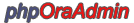
<style>
.page{position:relative;width:134px;height:23px;background:#ffffff}
.page>*{position:absolute;margin:0}
.t1{font:20px "Arial-ItalicMT";color:#ed1414}
.t2{font:20px "Arial-ItalicMT";color:#4b4f7d}
</style>
<div class="page">
<p class="t1" style="left:5px;top:3px;width:124px;height:19px"><span class="t2">php</span>OraAdmin</p>
</div>
